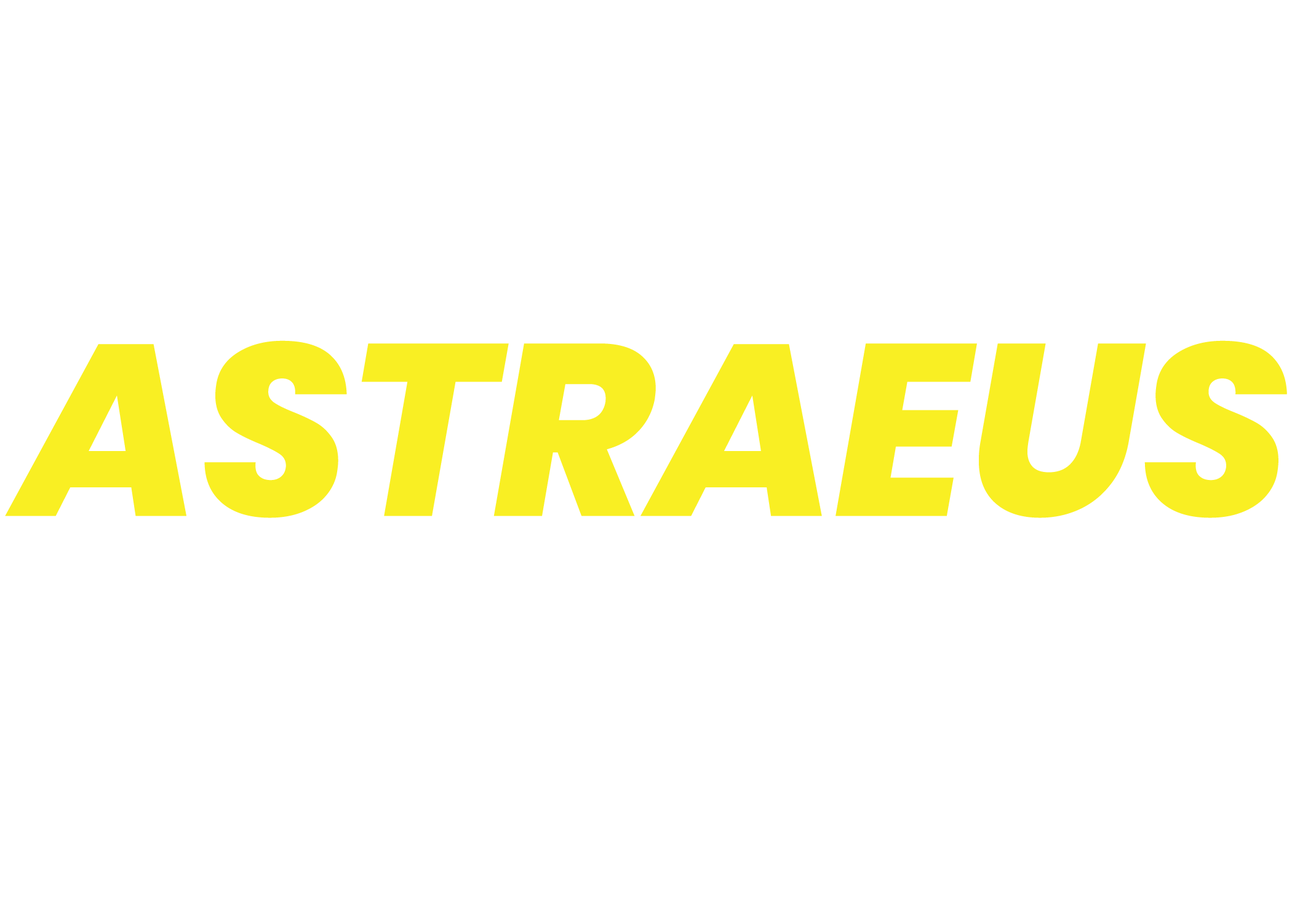
<style>
.page{position:relative;width:1292px;height:923px;background:#ffffff}
.page>*{position:absolute;margin:0}
.t1{font:243.5px "Poppins-ExtraBoldItalic";color:#f9ef23}
</style>
<div class="page">
<p class="t1" style="left:5px;top:340px;width:1282px;height:178px">ASTRAEUS</p>
</div>
